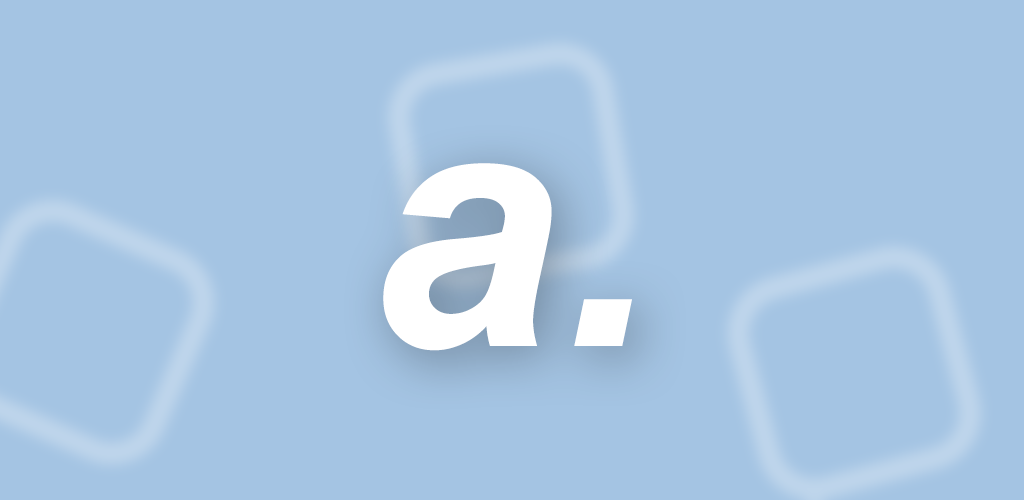
<style>
.page{position:relative;width:1024px;height:500px;background:#a4c4e3}
.page>*{position:absolute;margin:0}
.t1{font:344px "Arial-BoldItalicMT";color:#ffffff}
</style>
<div class="page">
<p class="t1" style="left:383px;top:163px;width:249px;height:188px">a.</p>
</div>
